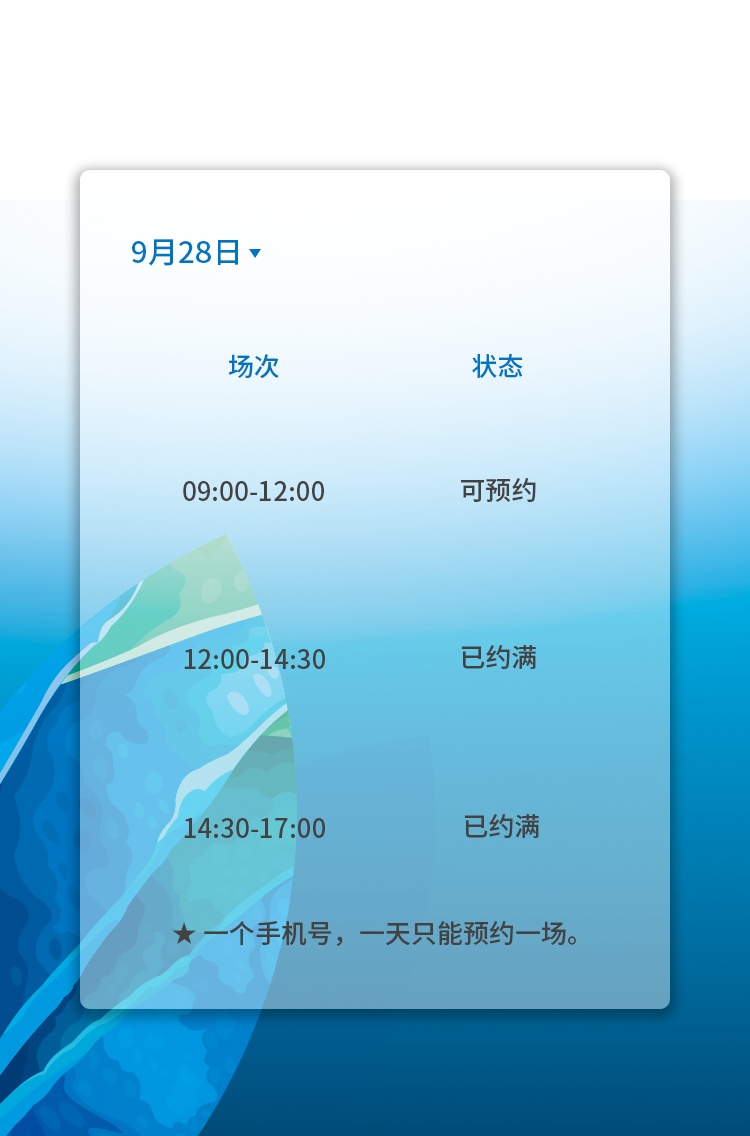
<style>
.page{position:relative;width:750px;height:1136px}
.page>*{position:absolute;margin:0}
.t1{font:30px "SourceHanSansCN-Medium";color:#0075c1}
.t2{font:26px "SourceHanSansCN-Medium";color:#0075c1}
.t3{font:26px "SourceHanSansCN-Medium";color:#434242}
.t4{font:26px "AdobeHeitiStd-Regular";color:#434242}
</style>
<div class="page">
<p class="t1" style="left:132px;top:239px;width:106px;height:27px">9月28日</p>
<p class="t2" style="left:472px;top:353px;width:51px;height:25px">状态</p>
<p class="t2" style="left:228px;top:354px;width:51px;height:25px">场次</p>
<p class="t3" style="left:183px;top:481px;width:141px;height:20px">09:00-12:00</p>
<p class="t3" style="left:460px;top:478px;width:76px;height:24px">可预约</p>
<p class="t3" style="left:184px;top:649px;width:141px;height:20px">12:00-14:30</p>
<p class="t3" style="left:461px;top:645px;width:75px;height:24px">已约满</p>
<p class="t3" style="left:184px;top:818px;width:141px;height:20px">14:30-17:00</p>
<p class="t3" style="left:464px;top:814px;width:75px;height:24px">已约满</p>
<p class="t3" style="left:172px;top:921px;width:404px;height:25px"><span class="t4">★ </span>一个手机号，一天只能预约一场。</p>
</div>
